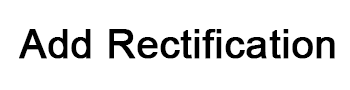
<style>
.page{position:relative;width:350px;height:90px;background:#ffffff}
.page>*{position:absolute;margin:0}
.t1{font:40px "ArialMT";color:#000000;font-weight:bold}
</style>
<div class="page">
<p class="t1" style="left:19px;top:29px;width:316px;height:30px">Add Rectification</p>
</div>
